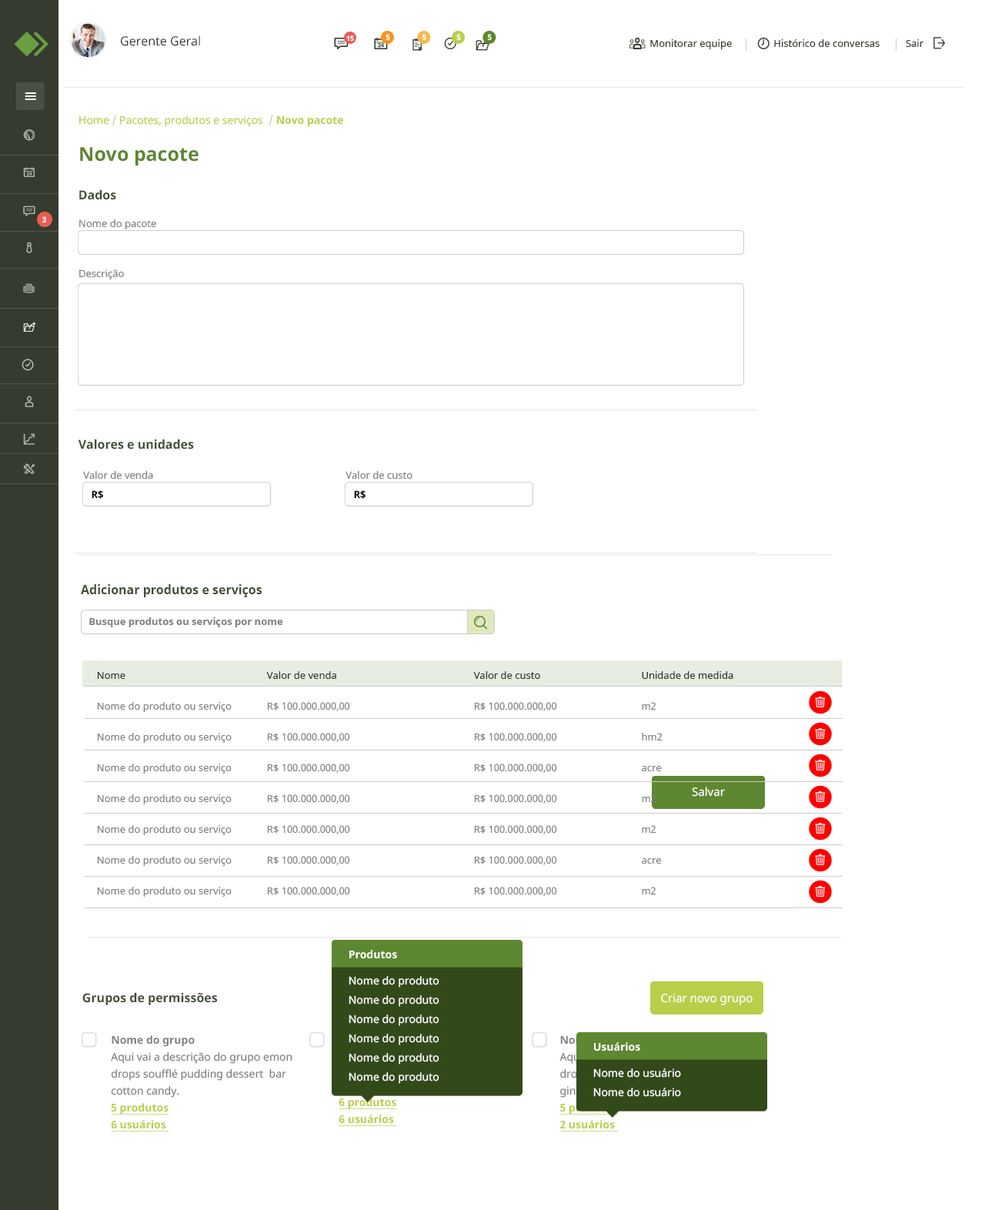
<style>
.page{position:relative;width:985px;height:1210px;background:#ffffff}
.page>*{position:absolute;margin:0}
.t1{font:12.3px "NotoSans";color:#353b2f}
.t2{font:6.9px "NotoSans-Bold";color:#ffffff}
.t3{font:7.7px "NotoSans-Bold";color:#ffffff}
.t4{font:10px "NotoSans";color:#353b2f}
.t5{font:10.8px "NotoSans";color:#b8cf49}
.t6{font:10.8px "NotoSans";color:#c7cfa1}
.t7{font:10.8px "NotoSans-Bold";color:#b8cf49}
.t8{font:19.3px "NotoSans-Bold";color:#5d8730}
.t9{font:12.3px "NotoSans-Bold";color:#424d38}
.t10{font:10px/50px "NotoSans";color:#808080}
.t11{font:10px/23.1px "NotoSans";color:#808080}
.t12{font:10px/19.2px "NotoSans-Bold";color:#000000}
.t13{font:10px "NotoSans-Bold";color:#808080}
.t14{font:10px/30.8px "NotoSans";color:#808080}
.t15{font:10px/30.8px "NotoSans";color:#333333}
.t16{font:11.5px "NotoSans";color:#ffffff}
.t17{font:10.8px/19.2px "NotoSans";color:#ffffff}
.t18{font:10.8px "NotoSans-Bold";color:#ffffff}
.t19{font:10.8px "NotoSans";color:#ffffff}
.t20{font:10.8px/16.9px "NotoSans";color:#808080}
.t21{font:10.8px/30.8px "NotoSans-Bold";color:#808080}
.t22{font:10.8px/16.9px "NotoSans-Bold";color:#b8cf49;text-decoration:underline}
</style>
<div class="page">
<p class="t1" style="left:121px;top:35px;width:79px;height:11px">Gerente Geral</p>
<p class="t2" style="left:346px;top:35px;width:8px;height:7px">15</p>
<p class="t3" style="left:386px;top:34px;width:4px;height:7px">5</p>
<p class="t3" style="left:423px;top:34px;width:3px;height:7px">5</p>
<p class="t3" style="left:456px;top:34px;width:5px;height:7px">5</p>
<p class="t3" style="left:488px;top:34px;width:4px;height:7px">5</p>
<p class="t4" style="left:650px;top:39px;width:274px;height:10px">Monitorar equipe                Histórico de conversas          Sair</p>
<p class="t5" style="left:79px;top:115px;width:264px;height:12px">Home <span class="t6">/</span> Pacotes, produtos e serviços  <span class="t6">/ </span><span class="t7">Novo pacote</span></p>
<p class="t8" style="left:80px;top:147px;width:119px;height:19px">Novo pacote</p>
<p class="t9" style="left:79px;top:189px;width:37px;height:11px">Dados</p>
<p class="t3" style="left:42px;top:216px;width:4px;height:7px">3</p>
<p class="t10" style="left:79px;top:219px;width:77px;height:61px">Nome do pacote<br>Descrição</p>
<p class="t9" style="left:78px;top:439px;width:116px;height:11px">Valores e unidades</p>
<p class="t11" style="left:83px;top:470px;width:70px;height:29px">Valor de venda<br><span class="t12">   R$</span></p>
<p class="t11" style="left:346px;top:470px;width:67px;height:29px">Valor de custo<br><span class="t12">   R$</span></p>
<p class="t9" style="left:81px;top:584px;width:182px;height:13px">Adicionar produtos e serviços</p>
<p class="t13" style="left:89px;top:617px;width:194px;height:10px">Busque produtos ou serviços por nome</p>
<p class="t14" style="left:97px;top:672px;width:135px;height:225px"><span class="t15">Nome<br></span>Nome do produto ou serviço<br>Nome do produto ou serviço<br>Nome do produto ou serviço<br>Nome do produto ou serviço<br>Nome do produto ou serviço<br>Nome do produto ou serviço<br>Nome do produto ou serviço</p>
<p class="t14" style="left:266px;top:671px;width:84px;height:225px"><span class="t15">Valor de venda<br></span>R$ 100.000.000,00<br>R$ 100.000.000,00<br>R$ 100.000.000,00<br>R$ 100.000.000,00<br>R$ 100.000.000,00<br>R$ 100.000.000,00<br>R$ 100.000.000,00</p>
<p class="t14" style="left:473px;top:671px;width:84px;height:225px"><span class="t15">Valor de custo<br></span>R$ 100.000.000,00<br>R$ 100.000.000,00<br>R$ 100.000.000,00<br>R$ 100.000.000,00<br>R$ 100.000.000,00<br>R$ 100.000.000,00<br>R$ 100.000.000,00</p>
<p class="t14" style="left:642px;top:671px;width:92px;height:224px"><span class="t15">Unidade de medida<br></span>m2<br>hm2<br>acre<br>m2<br>m2<br>acre<br>m2</p>
<p class="t16" style="left:692px;top:787px;width:33px;height:10px">Salvar</p>
<p class="t17" style="left:349px;top:950px;width:91px;height:134px"><span class="t18">Produtos<br></span><span class="t19"><br>Nome do produto<br></span>Nome do produto<br>Nome do produto<br>Nome do produto<br>Nome do produto<br>Nome do produto</p>
<p class="t9" style="left:82px;top:992px;width:135px;height:13px">Grupos de permissões</p>
<p class="t16" style="left:661px;top:993px;width:92px;height:12px">Criar novo grupo</p>
<p class="t20" style="left:111px;top:1035px;width:182px;height:97px"><span class="t21">Nome do grupo<br></span>Aqui vai a descrição do grupo emon drops soufflé pudding dessert  bar cotton candy.<br><span class="t22">5 produtos<br>6 usuários</span></p>
<p class="t19" style="left:594px;top:1042px;width:87px;height:55px"><span class="t18">Usuários<br></span><br>Nome do usuário<br><span class="t17">Nome do </span>usuário</p>
</div>
